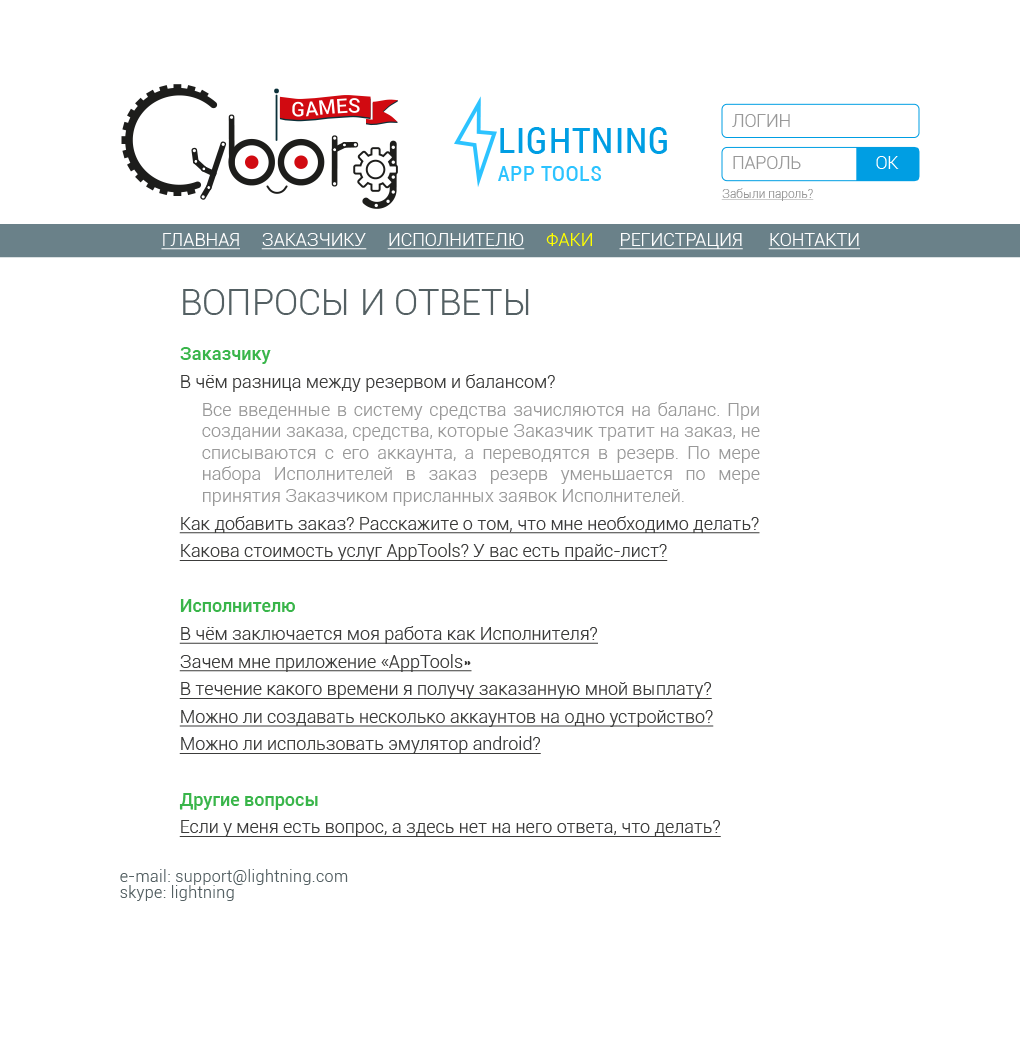
<style>
.page{position:relative;width:1021px;height:1037px;background:#ffffff}
.page>*{position:absolute;margin:0}
.t1{font:17.7px "Roboto-Light";color:#999999;text-transform:uppercase}
.t2{font:37.4px "Roboto-Condensed";letter-spacing:0.025em;color:#009ee3;text-transform:uppercase}
.t3{font:17.7px "Roboto-Light";color:#ffffff;text-transform:uppercase}
.t4{font:22.4px "Roboto-Condensed";letter-spacing:0.025em;color:#2cc3ff;text-transform:uppercase}
.t5{font:12px "Roboto-Light";color:#999999;text-decoration:underline}
.t6{font:18px "Roboto-Light";color:#ffffff;text-transform:uppercase;text-decoration:underline}
.t7{font:18px "Roboto-Light";color:#ffff00;text-transform:uppercase}
.t8{font:36px "Roboto-Light";color:#546063;text-transform:uppercase}
.t9{font:18px "Roboto-Light";color:#999999}
.t10{font:18px "Roboto-Medium";color:#39b54a}
.t11{font:18px "Roboto-Light";color:#3c3c3b}
.t12{font:18px "Roboto-Light";color:#3c3c3b;text-decoration:underline}
.t13{font:16px/16px "Roboto-Light";letter-spacing:0.025em;color:#546063}
</style>
<div class="page">
<p class="t1" style="left:732px;top:114px;width:58px;height:13px">логин</p>
<p class="t2" style="left:500px;top:127px;width:167px;height:27px">lightning</p>
<p class="t1" style="left:733px;top:156px;width:68px;height:13px">Пароль</p>
<p class="t3" style="left:876px;top:156px;width:23px;height:13px">ОК</p>
<p class="t4" style="left:498px;top:166px;width:103px;height:15px">app tools</p>
<p class="t5" style="left:721px;top:188px;width:93px;height:13px">Забыли пароль?</p>
<p class="t6" style="left:161px;top:233px;width:699px;height:17px">Главная     Заказчику     Исполнителю     <span class="t7">Факи      </span>регистрация      контакти</p>
<p class="t8" style="left:183px;top:289px;width:346px;height:26px">Вопросы и ответы</p>
<p class="t9" style="left:179px;top:347px;width:581px;height:490px"><span class="t10">Заказчику<br></span><span class="t11">В чём разница между резервом и балансом?<br></span>Все введенные в систему средства зачисляются на баланс. При создании заказа, средства, которые Заказчик тратит на заказ, не списываются с его аккаунта, а переводятся в резерв. По мере набора Исполнителей в заказ резерв уменьшается по мере принятия Заказчиком присланных заявок Исполнителей.<br><span class="t12">Как добавить заказ? Расскажите о том, что мне необходимо делать?<br>Какова стоимость услуг AppTools? У вас есть прайс-лист?<br><br></span><span class="t10">Исполнителю<br></span><span class="t12">В чём заключается моя работа как Исполнителя?<br>Зачем мне приложение «AppTools»<br>В течение какого времени я получу заказанную мной выплату?<br>Можно ли создавать несколько аккаунтов на одно устройство?<br>Можно ли использовать эмулятор android?<br><br></span><span class="t10">Другие вопросы<br></span><span class="t12">Если у меня есть вопрос, а здесь нет на него ответа, что делать?</span></p>
<p class="t13" style="left:120px;top:869px;width:228px;height:32px">e-mail: support@lightning.com <br>skype: lightning</p>
</div>
